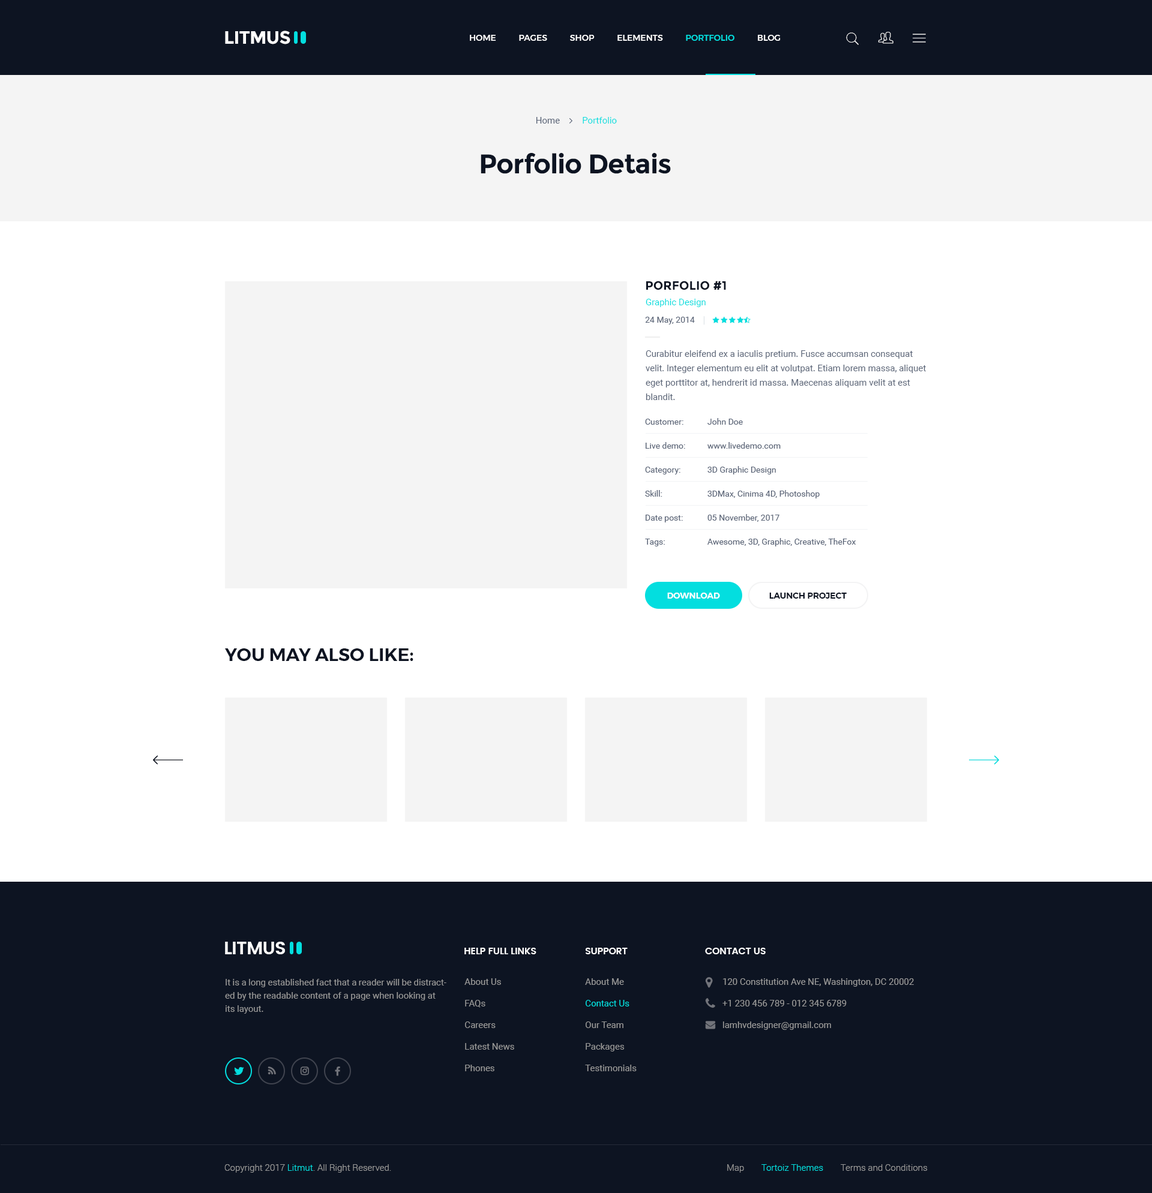
<style>
.page{position:relative;width:1152px;height:1193px;background:#ffffff}
.page>*{position:absolute;margin:0}
.t1{font:18px "Montserrat-Bold";letter-spacing:-0.025em;color:#ffffff;text-transform:uppercase}
.t2{font:8.4px "Montserrat-Medium";color:#ffffff;text-transform:uppercase}
.t3{font:8.4px "Montserrat-Medium";color:#03dedf;text-transform:uppercase}
.t4{font:9px "Roboto-Regular";color:#03dedf}
.t5{font:9px "Roboto-Regular";color:#5b6578}
.t6{font:27px "Montserrat-Bold";letter-spacing:-0.025em;color:#0d1422}
.t7{font:12px "Montserrat-Bold";color:#0d1422;text-transform:uppercase}
.t8{font:8.4px "Roboto-Regular";color:#5b6578}
.t9{font:9px/14.4px "Roboto-Regular";color:#5b6578}
.t10{font:8.4px/24px "Roboto-Regular";color:#5b6578}
.t11{font:8.4px "Montserrat-SemiBold";color:#ffffff;text-transform:uppercase}
.t12{font:8.4px "Montserrat-SemiBold";color:#0d1422;text-transform:uppercase}
.t13{font:18px "Montserrat-SemiBold";color:#0d1422;text-transform:uppercase}
.t14{font:18px "Poppins-SemiBold";letter-spacing:-0.025em;color:#ffffff;text-transform:uppercase}
.t15{font:9.6px "Poppins-SemiBold";letter-spacing:-0.025em;color:#ffffff;text-transform:uppercase}
.t16{font:9px/13.2px "Roboto-Regular";color:#999999}
.t17{font:9px/21.6px "Roboto-Regular";color:#999999}
.t18{font:9px/21.6px "Roboto-Regular";color:#03dedf}
.t19{font:9px "Roboto-Light";color:#999999}
.t20{font:9px "Roboto-Light";color:#03dedf}
</style>
<div class="page">
<p class="t1" style="left:225px;top:31px;width:65px;height:13px">Litmus</p>
<p class="t2" style="left:470px;top:35px;width:311px;height:6px">HOME           PAGES           SHOP           ELEMENTS           <span class="t3">PORTFOLIO</span>           BLOG</p>
<p class="t4" style="left:536px;top:117px;width:81px;height:7px"><span class="t5">Home          </span>Portfolio</p>
<p class="t6" style="left:481px;top:153px;width:190px;height:21px">Porfolio Detais</p>
<p class="t7" style="left:646px;top:281px;width:80px;height:9px">Porfolio #1</p>
<p class="t4" style="left:646px;top:299px;width:60px;height:8px">Graphic Design</p>
<p class="t8" style="left:645px;top:317px;width:50px;height:8px">24 May, 2014</p>
<p class="t9" style="left:646px;top:350px;width:280px;height:50px">Curabitur eleifend ex a iaculis pretium. Fusce accumsan consequat velit. Integer elementum eu elit at volutpat. Etiam lorem massa, aliquet eget porttitor at, hendrerit id massa. Maecenas aliquam velit at est blandit.</p>
<p class="t10" style="left:645px;top:419px;width:40px;height:128px">Customer:<br>Live demo:<br>Category:<br>Skill:<br>Date post:<br>Tags:</p>
<p class="t10" style="left:707px;top:418px;width:149px;height:129px">John Doe<br>www.livedemo.com<br>3D Graphic Design<br>3DMax, Cinima 4D, Photoshop<br>05 November, 2017<br>Awesome, 3D, Graphic, Creative, TheFox</p>
<p class="t11" style="left:667px;top:593px;width:53px;height:6px">DOWNLOAD</p>
<p class="t12" style="left:769px;top:593px;width:78px;height:6px">Launch Project</p>
<p class="t13" style="left:224px;top:649px;width:189px;height:12px">You May Also Like:</p>
<p class="t14" style="left:225px;top:942px;width:60px;height:13px">Litmus</p>
<p class="t15" style="left:464px;top:948px;width:72px;height:7px">Help full links</p>
<p class="t15" style="left:586px;top:948px;width:42px;height:7px">Support</p>
<p class="t15" style="left:705px;top:948px;width:61px;height:7px">Contact Us</p>
<p class="t16" style="left:225px;top:979px;width:221px;height:35px">It is a long established fact that a reader will be distracted by the readable content of a page when looking at its layout.</p>
<p class="t17" style="left:464px;top:979px;width:50px;height:93px">About Us<br>FAQs<br>Careers<br>Latest News<br>Phones</p>
<p class="t17" style="left:585px;top:979px;width:52px;height:93px">About Me<br><span class="t18">Contact Us<br></span>Our Team<br>Packages<br>Testimonials</p>
<p class="t17" style="left:722px;top:979px;width:192px;height:51px">120 Constitution Ave NE, Washington, DC 20002<br>+1 230 456 789 - 012 345 6789<br>lamhvdesigner@gmail.com</p>
<p class="t19" style="left:224px;top:1165px;width:167px;height:8px">Copyright 2017 <span class="t20">Litmut</span>. All Right Reserved.</p>
<p class="t19" style="left:727px;top:1165px;width:17px;height:8px">Map</p>
<p class="t20" style="left:761px;top:1165px;width:62px;height:6px">Tortoiz Themes</p>
<p class="t19" style="left:841px;top:1165px;width:87px;height:6px">Terms and Conditions</p>
</div>
